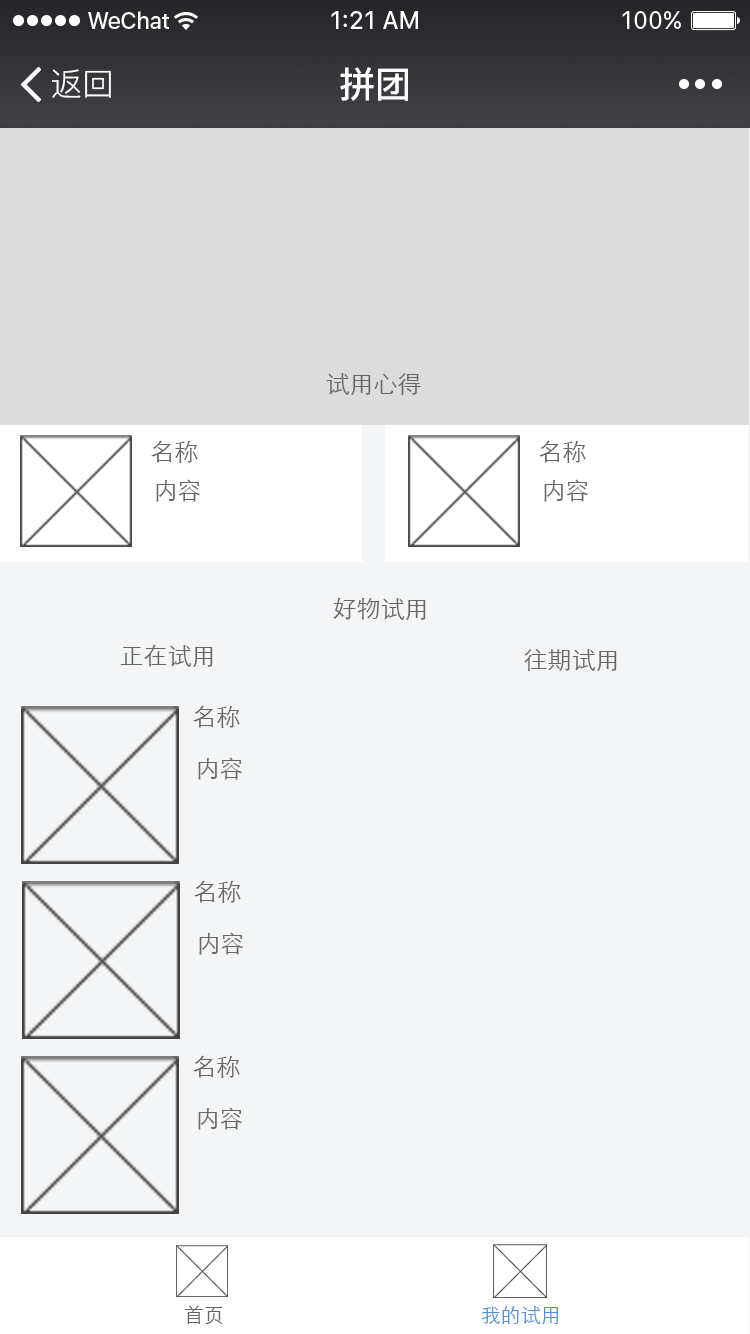
<style>
.page{position:relative;width:750px;height:1334px;background:#f4f5f6}
.page>*{position:absolute;margin:0}
.t1{font:32px "PingFang-SC-Regular";color:#ffffff}
.t2{font:36px "PingFang-SC-Bold";color:#ffffff}
.t3{font:24px "STXihei";color:#666666}
.t4{font:20px "STXihei";color:#666666}
.t5{font:20px "STXihei";color:#568fdc}
</style>
<div class="page">
<p class="t1" style="left:52px;top:69px;width:59px;height:29px">返回</p>
<p class="t2" style="left:340px;top:67px;width:68px;height:34px">拼团</p>
<p class="t3" style="left:326px;top:373px;width:95px;height:22px">试用心得</p>
<p class="t3" style="left:151px;top:440px;width:47px;height:23px">名称</p>
<p class="t3" style="left:539px;top:440px;width:47px;height:23px">名称</p>
<p class="t3" style="left:156px;top:479px;width:44px;height:23px">内容</p>
<p class="t3" style="left:544px;top:479px;width:44px;height:23px">内容</p>
<p class="t3" style="left:333px;top:597px;width:93px;height:23px">好物试用</p>
<p class="t3" style="left:120px;top:644px;width:93px;height:23px">正在试用</p>
<p class="t3" style="left:524px;top:649px;width:93px;height:22px">往期试用</p>
<p class="t3" style="left:193px;top:705px;width:47px;height:23px">名称</p>
<p class="t3" style="left:198px;top:757px;width:44px;height:23px">内容</p>
<p class="t3" style="left:194px;top:880px;width:47px;height:23px">名称</p>
<p class="t3" style="left:199px;top:932px;width:44px;height:23px">内容</p>
<p class="t3" style="left:193px;top:1055px;width:47px;height:23px">名称</p>
<p class="t3" style="left:198px;top:1107px;width:44px;height:23px">内容</p>
<p class="t4" style="left:184px;top:1305px;width:39px;height:20px">首页</p>
<p class="t5" style="left:482px;top:1306px;width:77px;height:19px">我的试用</p>
</div>
